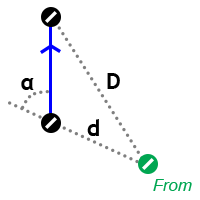
<style>
.page{position:relative;width:200px;height:200px;background:#ffffff}
.page>*{position:absolute;margin:0}
.t1{font:23.3px "TrebuchetMS-Bold";color:#000000}
.t2{font:16.7px "Arial-ItalicMT";color:#00a651}
</style>
<div class="page">
<p class="t1" style="left:21px;top:78px;width:13px;height:12px">α</p>
<p class="t1" style="left:107px;top:73px;width:13px;height:16px">D</p>
<p class="t1" style="left:87px;top:119px;width:12px;height:17px">d</p>
<p class="t2" style="left:153px;top:179px;width:39px;height:12px">From</p>
</div>
